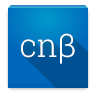
<style>
.page{position:relative;width:96px;height:96px}
.page>*{position:absolute;margin:0}
.t1{font:32.5px "RobotoSlab-Light";color:#ffffff}
</style>
<div class="page">
<p class="t1" style="left:21px;top:33px;width:54px;height:31px">cnβ</p>
</div>
